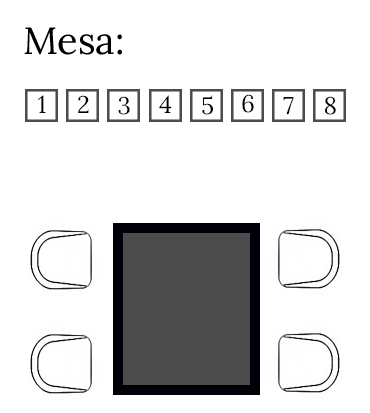
<style>
.page{position:relative;width:370px;height:413px;background:#ffffff}
.page>*{position:absolute;margin:0}
.t1{font:37.9px "Lora-Regular";color:#000000}
.t2{font:24px "Lora-Regular";color:#000000}
</style>
<div class="page">
<p class="t1" style="left:24px;top:27px;width:98px;height:28px">Mesa:</p>
<p class="t2" style="left:38px;top:95px;width:8px;height:18px">1</p>
<p class="t2" style="left:78px;top:95px;width:11px;height:18px">2</p>
<p class="t2" style="left:118px;top:96px;width:12px;height:19px">3</p>
<p class="t2" style="left:159px;top:95px;width:13px;height:18px">4</p>
<p class="t2" style="left:202px;top:95px;width:11px;height:20px">5</p>
<p class="t2" style="left:242px;top:94px;width:12px;height:19px">6</p>
<p class="t2" style="left:283px;top:97px;width:11px;height:18px">7</p>
<p class="t2" style="left:325px;top:96px;width:11px;height:19px">8</p>
</div>
